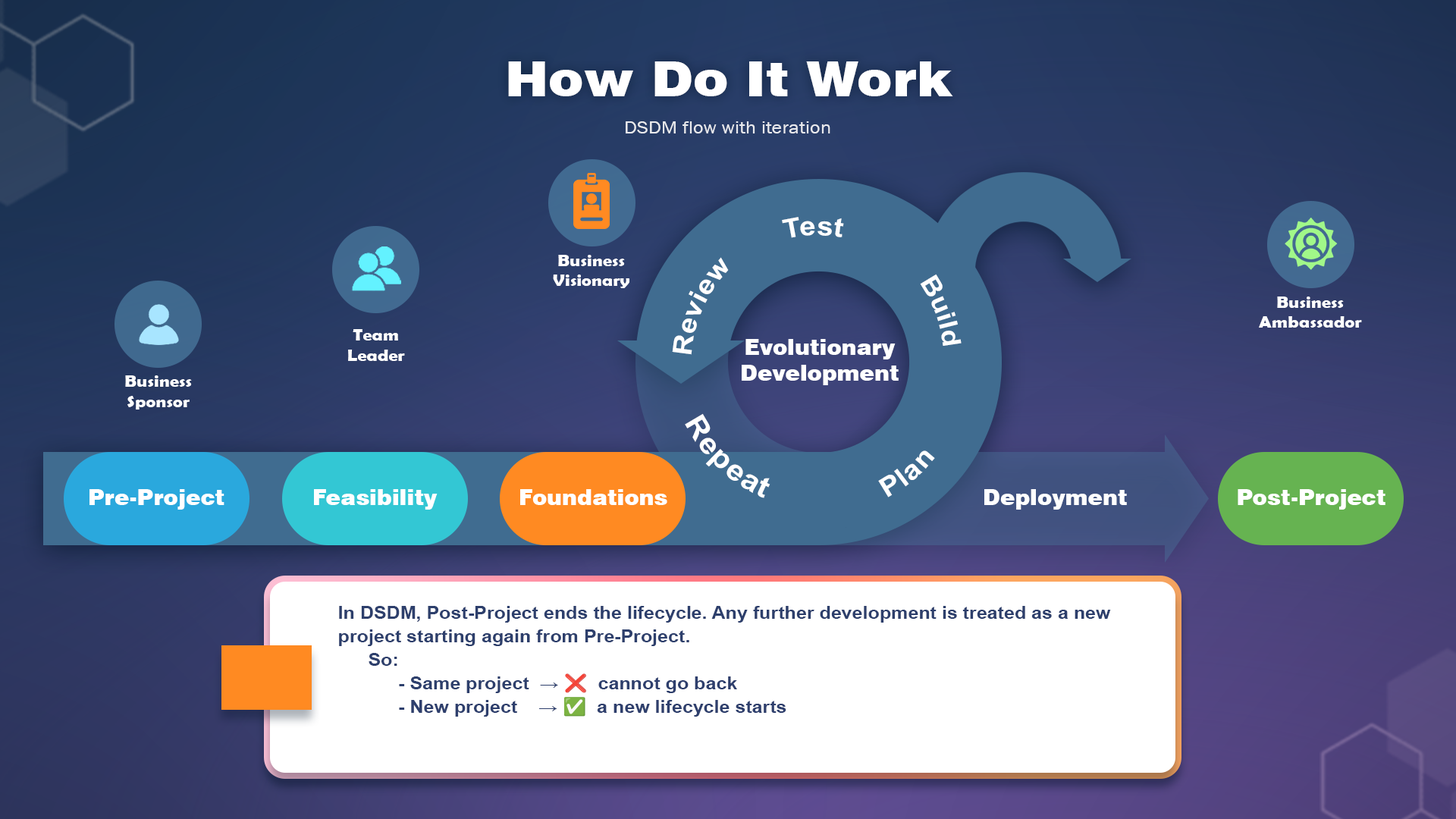
<style>
.page{position:relative;width:1456px;height:819px}
.page>*{position:absolute;margin:0}
.t1{font:48.5px "Swiss721BT-Black";color:#ffffff;scale:1.1 1}
.t2{font:18.2px "AA-Khmer-AngDaunPov";color:#ffffff;scale:1.1 1}
.t3{font:26.5px "Arial-BoldMT";color:#ffffff;scale:1.1 1}
.t4{font:16.9px "BerlinSansFBDemi-Bold";color:#ffffff;scale:1.1 1}
.t5{font:25.7px "Arial-BoldMT";color:#ffffff;scale:1.1 1}
.t6{font:21.7px "Swiss721BT-Black";color:#ffffff}
.t7{font:28.9px "Arial-BoldMT";color:#ffffff;scale:1.1 1}
.t8{font:17.3px/23.5px "Arial-BoldMT";color:#2d3f6c;scale:1.1 1}
.t9{font:17.3px/23.5px "NotoColorEmoji-SVG";color:#ffffff;scale:1.1 1}
.t10{font:17.3px/23.5px "Arial-BoldMT";color:#2e3f6d;scale:1.1 1}
</style>
<div class="page">
<p class="t1" style="left:508px;top:61px;width:445px;height:35px">How Do It Work</p>
<p class="t2" style="left:626px;top:121px;width:204px;height:12px;opacity:0.86">DSDM flow with iteration</p>
<p class="t3" style="left:782px;top:217px;width:62px;height:21px;rotate:42deg">Test</p>
<p class="t4" style="left:553px;top:255px;width:76px;height:33px;text-align:center">Business<br>Visionary</p>
<p class="t3" style="left:672px;top:257px;width:57px;height:98px;rotate:-32deg">Review</p>
<p class="t5" style="left:920px;top:274px;width:42px;height:72px;rotate:85deg">Build</p>
<p class="t4" style="left:1259px;top:297px;width:103px;height:31px;text-align:center">Business<br>Ambassador</p>
<p class="t4" style="left:348px;top:329px;width:57px;height:32px;text-align:center">Team<br>Leader</p>
<p class="t6" style="left:742px;top:339px;width:157px;height:46px;text-align:center">Evolutionary<br>Development</p>
<p class="t4" style="left:125px;top:375px;width:67px;height:34px;text-align:center">Business<br>Sponsor</p>
<p class="t7" style="left:685px;top:413px;width:85px;height:85px;rotate:-124deg">Repeat</p>
<p class="t3" style="left:878px;top:450px;width:57px;height:47px;rotate:105deg">Plan</p>
<p class="t6" style="left:89px;top:489px;width:135px;height:21px">Pre-Project</p>
<p class="t6" style="left:314px;top:489px;width:124px;height:21px">Feasibility</p>
<p class="t6" style="left:520px;top:489px;width:147px;height:16px">Foundations</p>
<p class="t6" style="left:984px;top:489px;width:143px;height:21px">Deployment</p>
<p class="t6" style="left:1238px;top:489px;width:147px;height:21px">Post-Project</p>
<p class="t8" style="left:339px;top:606px;width:772px;height:111px">In DSDM, Post-Project ends the lifecycle. Any further development is treated as a new <br>project starting again from Pre-Project.<br> So:<br>  - Same project  → <span class="t9">❌</span><span class="t10">  cannot go back<br>  - New project    → </span><span class="t9">✅ </span><span class="t10"> a new lifecycle starts</span></p>
</div>
